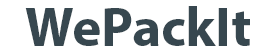
<style>
.page{position:relative;width:280px;height:56px;background:#ffffff}
.page>*{position:absolute;margin:0}
.t1{font:55px "MyriadPro-Bold";color:#37474f}
</style>
<div class="page">
<p class="t1" style="left:25px;top:6px;width:225px;height:40px">WePackIt</p>
</div>
